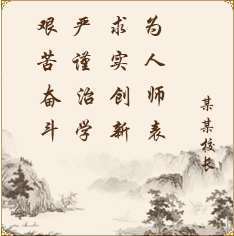
<style>
.page{position:relative;width:234px;height:236px;background:#f9efe3}
.page>*{position:absolute;margin:0}
.t1{font:24px "STXingkai";color:#563317}
.t2{font:18px "STXingkai";color:#563317}
</style>
<div class="page">
<p class="t1" style="left:36px;top:14px;width:126px;height:22px">艰  严  求  为</p>
<p class="t1" style="left:37px;top:49px;width:129px;height:23px">苦  谨  实  人</p>
<p class="t1" style="left:39px;top:84px;width:126px;height:24px">奋  治  创  师</p>
<p class="t2" style="left:200px;top:95px;width:14px;height:17px">某</p>
<p class="t1" style="left:40px;top:119px;width:126px;height:24px">斗  学  新  表</p>
<p class="t2" style="left:200px;top:117px;width:14px;height:17px">某</p>
<p class="t2" style="left:200px;top:138px;width:15px;height:15px">校</p>
<p class="t2" style="left:201px;top:156px;width:14px;height:16px">长</p>
</div>
